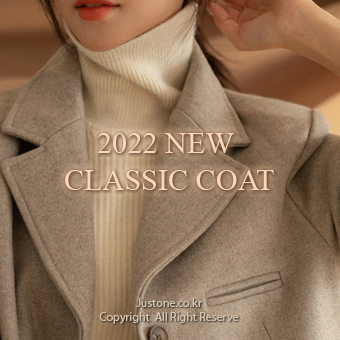
<style>
.page{position:relative;width:340px;height:340px}
.page>*{position:absolute;margin:0}
.t1{font:30.2px "TimesNewRomanPSMT";color:#ffd5b7}
.t2{font:12px "MyriadPro-Regular";color:#d3c3ae}
</style>
<div class="page">
<p class="t1" style="left:65px;top:133px;width:209px;height:57px;text-align:center">2022 NEW <br>CLASSIC COAT</p>
<p class="t2" style="left:99px;top:298px;width:140px;height:26px;text-align:center">Justone.co.kr<br>Copyright  All Right Reserve</p>
</div>
